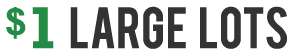
<style>
.page{position:relative;width:299px;height:54px;background:#ffffff}
.page>*{position:absolute;margin:0}
.t1{font:45.9px "Bebas";color:#333333}
.t2{font:40px "Rockwell-Bold";color:#238b45}
.t3{font:60px "Rockwell-Bold";color:#238b45}
</style>
<div class="page">
<p class="t1" style="left:70px;top:6px;width:217px;height:43px">LARGE  LOTS</p>
<p class="t2" style="left:6px;top:7px;width:48px;height:42px">$<span class="t3">1</span></p>
</div>
